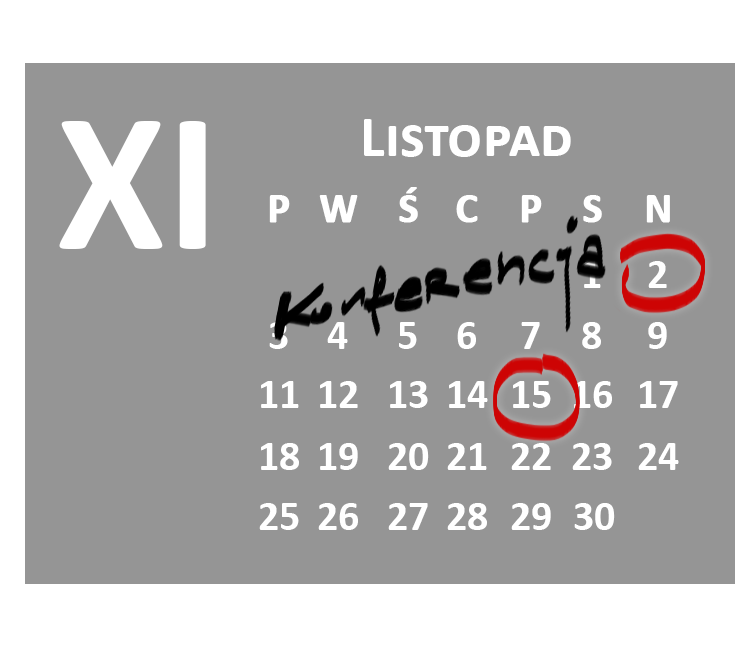
<style>
.page{position:relative;width:750px;height:654px;background:#959595}
.page>*{position:absolute;margin:0}
.t1{font:200px "Calibri-Bold";color:#ffffff}
.t2{font:58.3px "Calibri-Bold";color:#ffffff;font-variant:small-caps}
.t3{font:41.7px "Calibri-Bold";color:#ffffff;text-transform:uppercase;font-weight:bold}
.t4{font:41.7px "Calibri-Bold";text-transform:uppercase}
.t5{font:41.7px "Calibri-Bold";color:#ffffff;text-transform:uppercase}
</style>
<div class="page">
<p class="t1" style="left:59px;top:121px;width:147px;height:128px">XI</p>
<p class="t2" style="left:364px;top:119px;width:207px;height:38px">Listopad</p>
<p class="t3" style="left:269px;top:195px;width:21px;height:28px">p</p>
<p class="t3" style="left:319px;top:195px;width:39px;height:28px">w</p>
<p class="t3" style="left:399px;top:187px;width:19px;height:36px">ś</p>
<p class="t3" style="left:456px;top:195px;width:22px;height:28px">c</p>
<p class="t3" style="left:521px;top:195px;width:21px;height:28px">p</p>
<p class="t3" style="left:583px;top:195px;width:19px;height:28px">s</p>
<p class="t3" style="left:646px;top:195px;width:24px;height:28px">n</p>
<p class="t4" style="left:584px;top:261px;width:17px;height:27px">1</p>
<p class="t5" style="left:648px;top:261px;width:19px;height:27px">2</p>
<p class="t5" style="left:327px;top:322px;width:21px;height:27px">4</p>
<p class="t5" style="left:399px;top:322px;width:18px;height:27px">5</p>
<p class="t5" style="left:457px;top:322px;width:19px;height:27px">6</p>
<p class="t5" style="left:521px;top:322px;width:19px;height:27px">7</p>
<p class="t5" style="left:582px;top:322px;width:19px;height:27px">8</p>
<p class="t5" style="left:648px;top:322px;width:19px;height:27px">9</p>
<p class="t5" style="left:261px;top:381px;width:38px;height:27px">11</p>
<p class="t5" style="left:320px;top:381px;width:38px;height:27px">12</p>
<p class="t5" style="left:390px;top:381px;width:38px;height:27px">13</p>
<p class="t5" style="left:449px;top:381px;width:39px;height:27px">14</p>
<p class="t5" style="left:513px;top:381px;width:38px;height:27px">15</p>
<p class="t5" style="left:574px;top:381px;width:38px;height:27px">16</p>
<p class="t5" style="left:640px;top:381px;width:38px;height:27px">17</p>
<p class="t5" style="left:261px;top:443px;width:38px;height:27px">18</p>
<p class="t5" style="left:320px;top:443px;width:38px;height:27px">19</p>
<p class="t5" style="left:388px;top:443px;width:41px;height:27px">20</p>
<p class="t5" style="left:447px;top:443px;width:40px;height:27px">21</p>
<p class="t5" style="left:511px;top:443px;width:40px;height:27px">22</p>
<p class="t5" style="left:572px;top:443px;width:40px;height:27px">23</p>
<p class="t5" style="left:638px;top:443px;width:41px;height:27px">24</p>
<p class="t5" style="left:259px;top:503px;width:40px;height:27px">25</p>
<p class="t5" style="left:318px;top:503px;width:40px;height:27px">26</p>
<p class="t5" style="left:388px;top:503px;width:40px;height:27px">27</p>
<p class="t5" style="left:447px;top:503px;width:40px;height:27px">28</p>
<p class="t5" style="left:511px;top:503px;width:40px;height:27px">29</p>
<p class="t5" style="left:574px;top:503px;width:41px;height:27px">30</p>
</div>
